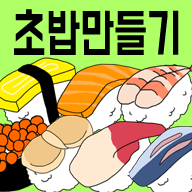
<style>
.page{position:relative;width:192px;height:192px;background:#afff67}
.page>*{position:absolute;margin:0}
.t1{font:46.5px "BMDoHyeon";color:#000000;scale:0.76 1}
</style>
<div class="page">
<p class="t1" style="left:14px;top:9px;width:165px;height:46px">초밥만들기</p>
</div>
